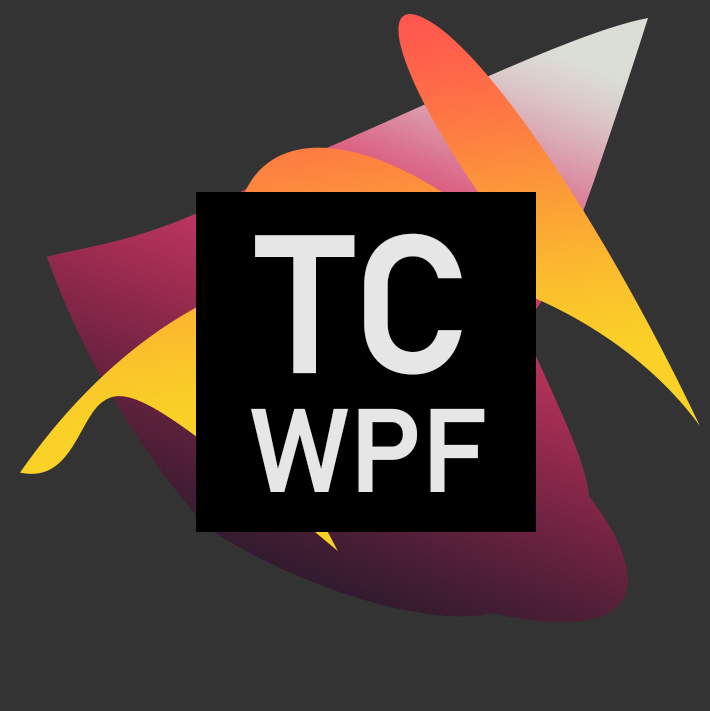
<style>
.page{position:relative;width:710px;height:711px;background:#333333}
.page>*{position:absolute;margin:0}
.t1{font:194.4px "Bahnschrift-SemiBold";color:#e6e6e6}
.t2{font:116.7px "Bahnschrift-SemiBold";color:#e6e6e6}
</style>
<div class="page">
<p class="t1" style="left:255px;top:233px;width:207px;height:142px">TC</p>
<p class="t2" style="left:251px;top:408px;width:234px;height:84px">WPF</p>
</div>
